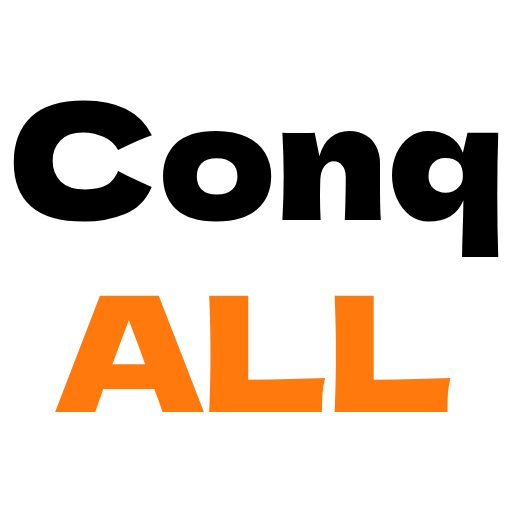
<style>
.page{position:relative;width:512px;height:512px;background:#ffffff}
.page>*{position:absolute;margin:0}
.t1{font:160px "DelaGothicOne-Regular";color:#000000}
.t2{font:160px "DelaGothicOne-Regular";color:#ff790c}
</style>
<div class="page">
<p class="t1" style="left:13px;top:100px;width:486px;height:312px;text-align:center">Conq<br><span class="t2">ALL</span></p>
</div>
